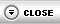
<style>
.page{position:relative;width:60px;height:24px}
.page>*{position:absolute;margin:0}
.t1{font:9px "ArialNarrow";color:#000000;font-weight:bold}
</style>
<div class="page">
<p class="t1" style="left:24px;top:10px;width:29px;height:6px">CLOSE</p>
</div>
